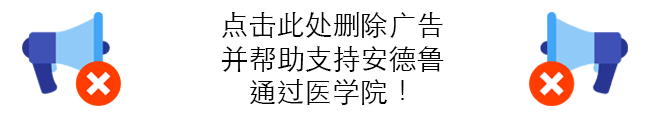
<style>
.page{position:relative;width:650px;height:115px;background:#ffffff}
.page>*{position:absolute;margin:0}
.t1{font:28px "STHeitiTC-Light";color:#030303}
</style>
<div class="page">
<p class="t1" style="left:221px;top:12px;width:223px;height:93px;text-align:center">点击此处删除广告<br>并帮助支持安德鲁<br>通过医学院！</p>
</div>
